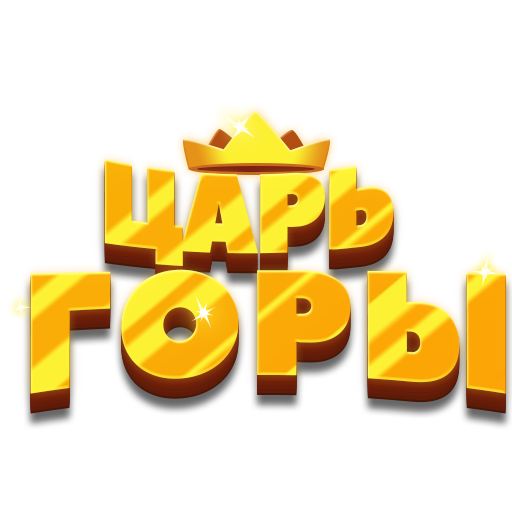
<style>
.page{position:relative;width:512px;height:512px;background:#ffffff}
.page>*{position:absolute;margin:0}
.t1{font:119.8px "PeaceSans";letter-spacing:-0.05em;scale:0.87 1}
.t2{font:172.5px "PeaceSans";letter-spacing:0.025em;scale:0.87 1}
</style>
<div class="page">
<p class="t1" style="left:104px;top:159px;width:290px;height:108px">ЦАРЬ</p>
<p class="t2" style="left:30px;top:269px;width:476px;height:125px">ГОРЫ</p>
</div>
